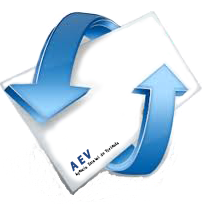
<style>
.page{position:relative;width:204px;height:204px;background:#ffffff}
.page>*{position:absolute;margin:0}
.t1{font:10.6px "AdobeGothicStd-Bold";color:#224984;font-weight:bold}
.t2{font:4.8px "Courier";color:#000000;scale:0.73 1}
</style>
<div class="page">
<p class="t1" style="left:70px;top:149px;width:21px;height:23px;rotate:-38deg">A E V</p>
<p class="t2" style="left:75px;top:142px;width:44px;height:34px;rotate:-37deg">Agencia Estatal de Vivienda</p>
</div>
